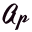
<style>
.page{position:relative;width:32px;height:32px;background:#ffffff}
.page>*{position:absolute;margin:0}
.t1{font:24px "Yesteryear-Regular";letter-spacing:0.1em;color:#15050f}
</style>
<div class="page">
<p class="t1" style="left:2px;top:3px;width:28px;height:27px">Ap</p>
</div>
